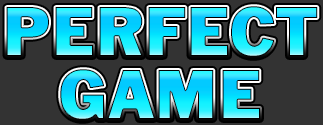
<style>
.page{position:relative;width:323px;height:125px;background:#333333}
.page>*{position:absolute;margin:0}
.t1{font:72px "FranklinGotT-Regu";font-weight:bold}
</style>
<div class="page">
<p class="t1" style="left:6px;top:6px;width:312px;height:51px">PERFECT</p>
<p class="t1" style="left:60px;top:69px;width:200px;height:51px">GAME</p>
</div>
